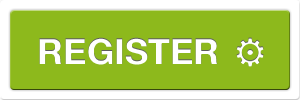
<style>
.page{position:relative;width:300px;height:100px;background:#8db91c}
.page>*{position:absolute;margin:0}
.t1{font:36px "HelveticaNeue-Bold";color:#ffffff;font-variant:small-caps}
</style>
<div class="page">
<p class="t1" style="left:39px;top:37px;width:179px;height:28px">REGISTER</p>
</div>
